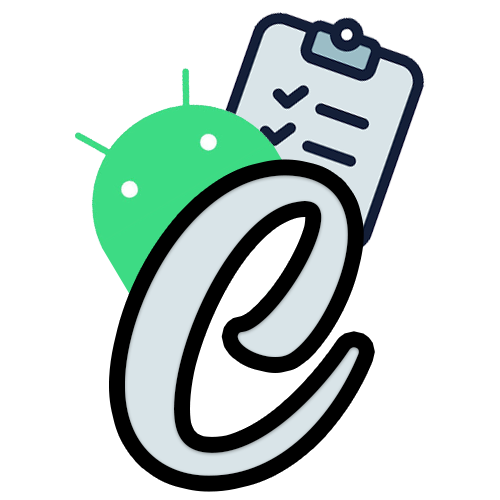
<style>
.page{position:relative;width:500px;height:500px;background:#ffffff}
.page>*{position:absolute;margin:0}
.t1{font:480px "CreamCake";color:#d9e4e8}
</style>
<div class="page">
<p class="t1" style="left:125px;top:175px;width:234px;height:301px">C</p>
</div>
